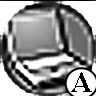
<style>
.page{position:relative;width:96px;height:96px;background:#ffffff}
.page>*{position:absolute;margin:0}
.t1{font:30px "TimesNewRomanPS-BoldMT";color:#000000}
</style>
<div class="page">
<p class="t1" style="left:71px;top:71px;width:21px;height:20px">A</p>
</div>
